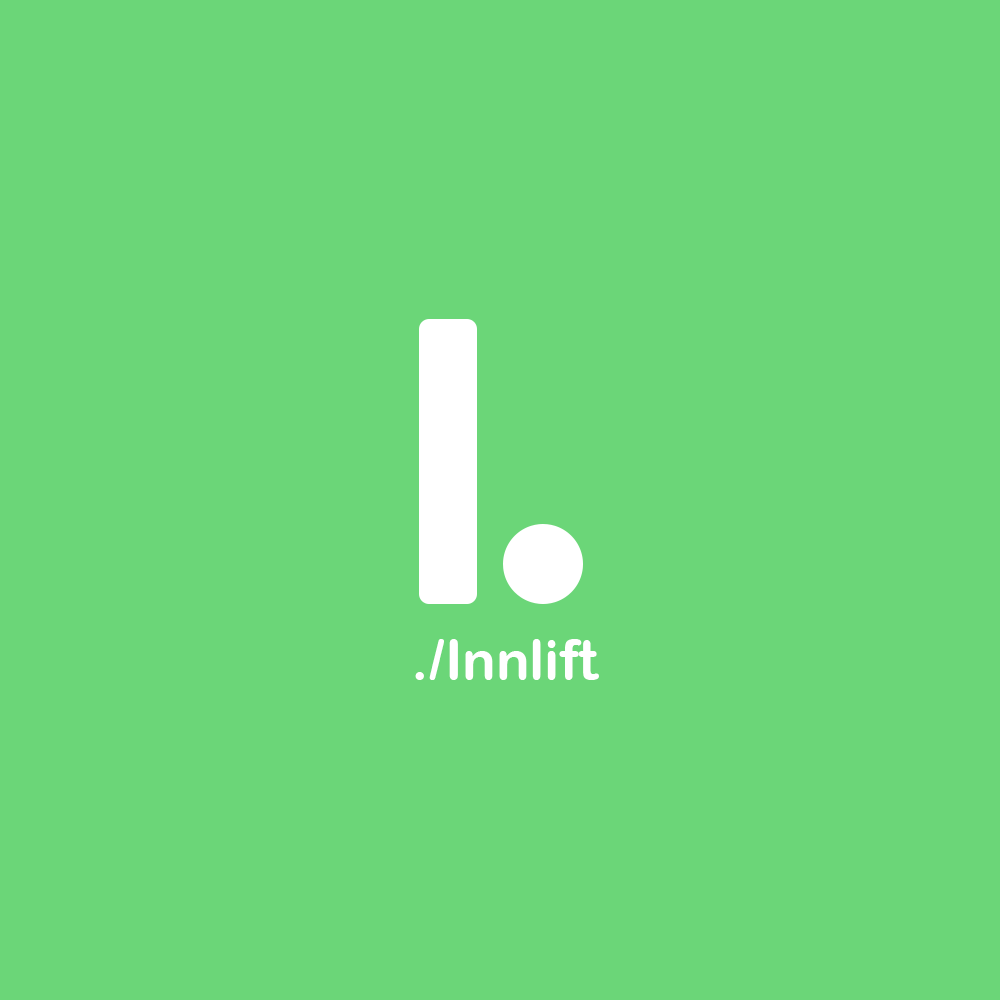
<style>
.page{position:relative;width:1000px;height:1000px;background:#6bd678}
.page>*{position:absolute;margin:0}
.t1{font:55.7px "ArialRoundedMTBold";color:#ffffff}
</style>
<div class="page">
<p class="t1" style="left:415px;top:639px;width:184px;height:41px">./Innlift</p>
</div>
